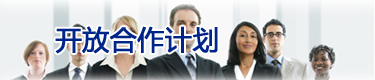
<style>
.page{position:relative;width:375px;height:80px}
.page>*{position:absolute;margin:0}
.t1{font:26.7px "MicrosoftYaHei";color:#012489;font-weight:bold}
</style>
<div class="page">
<p class="t1" style="left:55px;top:26px;width:163px;height:28px">开放合作计划</p>
</div>
